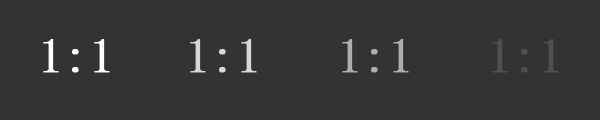
<style>
.page{position:relative;width:600px;height:120px;background:#333333}
.page>*{position:absolute;margin:0}
.t1{font:48px "SimSun";color:#ffffff;font-weight:bold}
.t2{font:48px "SimSun";color:#d7d7d7;font-weight:bold}
.t3{font:48px "SimSun";color:#aeaeae;font-weight:bold}
.t4{font:48px "SimSun";color:#505050;font-weight:bold}
</style>
<div class="page">
<p class="t1" style="left:43px;top:39px;width:67px;height:34px">1:1</p>
<p class="t2" style="left:190px;top:39px;width:67px;height:34px">1:1</p>
<p class="t3" style="left:342px;top:39px;width:67px;height:34px">1:1</p>
<p class="t4" style="left:492px;top:39px;width:67px;height:34px">1:1</p>
</div>
